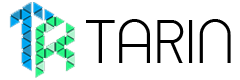
<style>
.page{position:relative;width:240px;height:80px;background:#ffffff}
.page>*{position:absolute;margin:0}
.t1{font:58.6px "TimeBurner";color:#000000}
</style>
<div class="page">
<p class="t1" style="left:86px;top:19px;width:145px;height:44px">TARIN</p>
</div>
